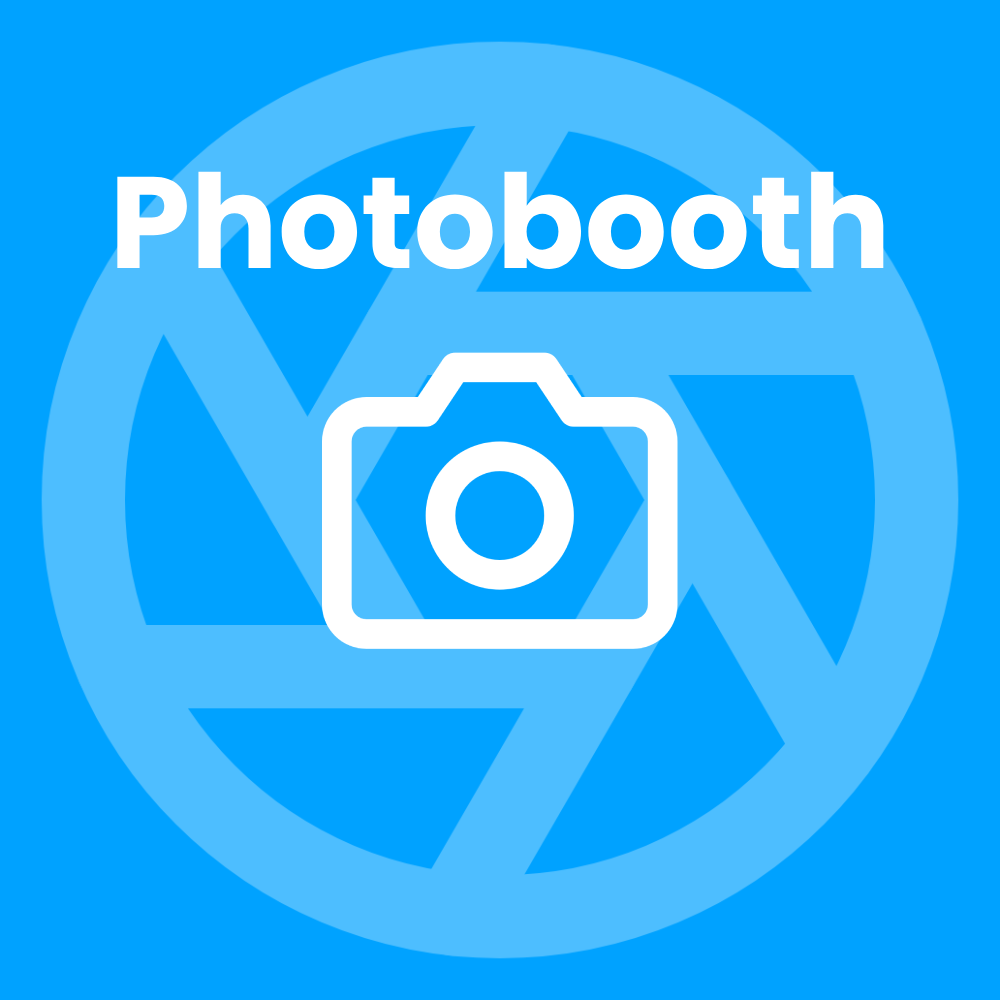
<style>
.page{position:relative;width:1000px;height:1000px;background:#00a2ff}
.page>*{position:absolute;margin:0}
.t1{font:130px "Poppins-Bold";color:#ffffff}
</style>
<div class="page">
<p class="t1" style="left:117px;top:171px;width:767px;height:99px">Photobooth</p>
</div>
